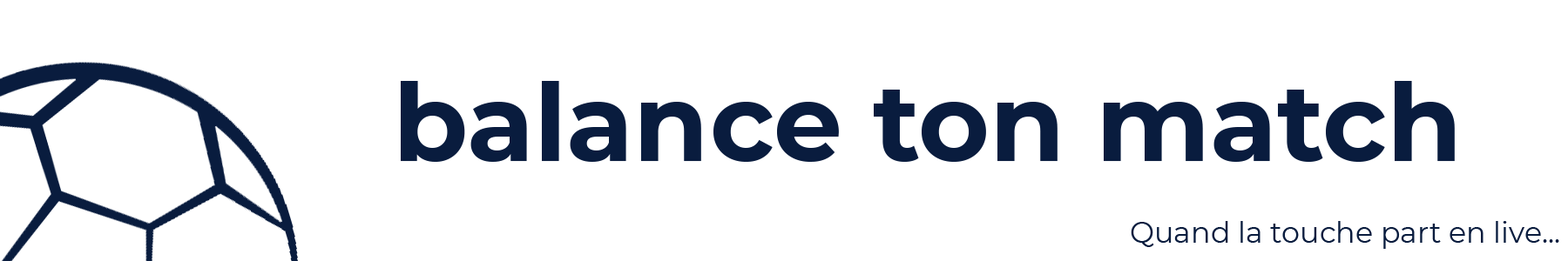
<style>
.page{position:relative;width:1568px;height:261px;background:#ffffff}
.page>*{position:absolute;margin:0}
.t1{font:108.9px "Montserrat-Bold";color:#091c3e}
.t2{font:29px "Montserrat-Regular";color:#091c3e}
</style>
<div class="page">
<p class="t1" style="left:401px;top:81px;width:1054px;height:81px">balance ton match</p>
<p class="t2" style="left:1131px;top:221px;width:428px;height:28px">Quand la touche part en live...</p>
</div>
